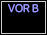
<style>
.page{position:relative;width:47px;height:35px;background:#000000}
.page>*{position:absolute;margin:0}
.t1{font:11px "SFProRounded-Regular";color:#9999ff}
</style>
<div class="page">
<p class="t1" style="left:8px;top:4px;width:31px;height:9px">VOR B</p>
</div>
